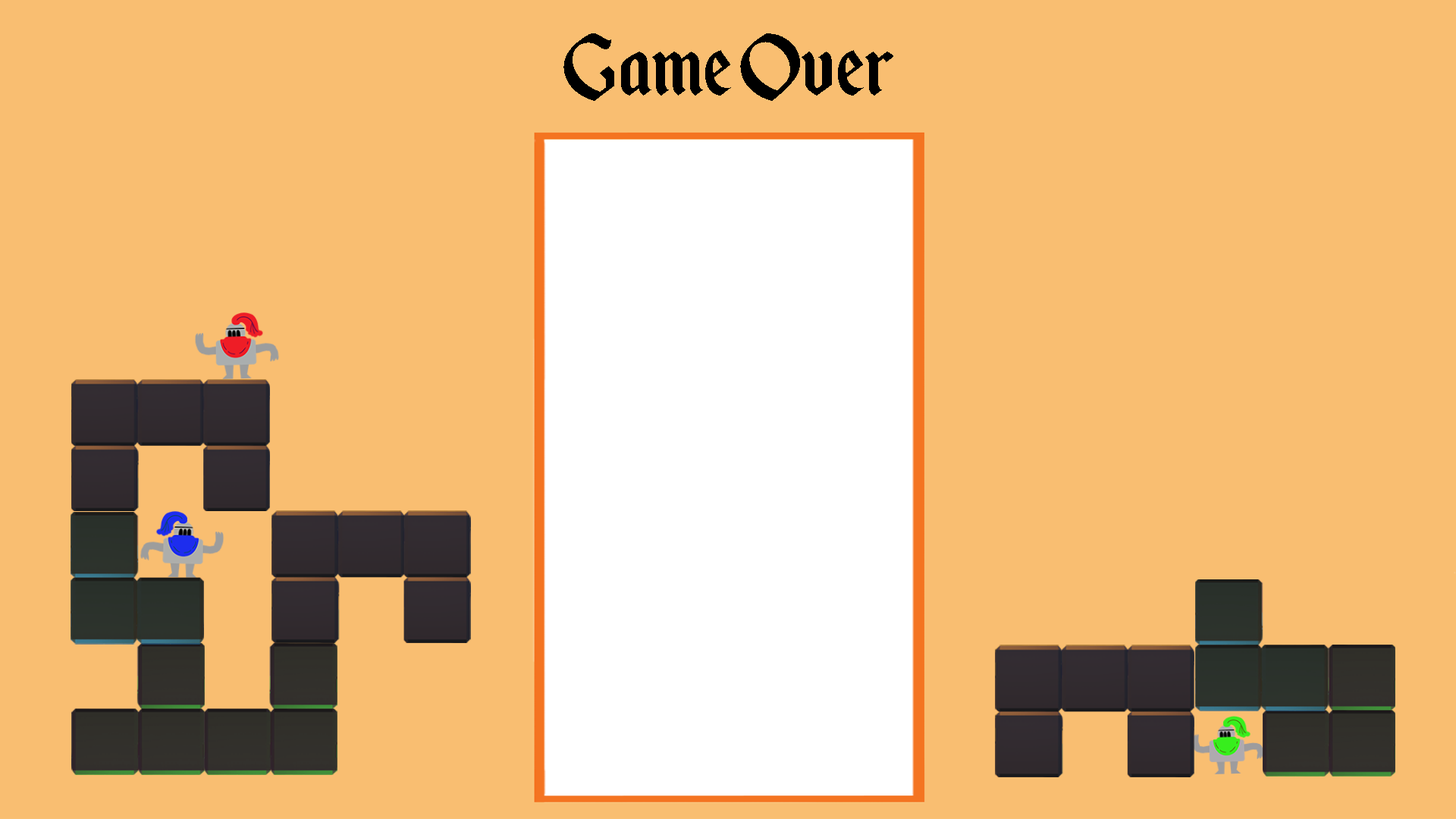
<style>
.page{position:relative;width:1456px;height:819px;background:#f9be71}
.page>*{position:absolute;margin:0}
.t1{font:104.3px "EnchantedLand";color:#000000}
</style>
<div class="page">
<p class="t1" style="left:563px;top:33px;width:330px;height:68px">Game Over</p>
</div>
